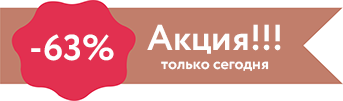
<style>
.page{position:relative;width:343px;height:101px;background:#c17e6b}
.page>*{position:absolute;margin:0}
.t1{font:16px "Circe-Bold";color:#fefefe}
.t2{font:36px "Circe-Bold";color:#fefefe}
</style>
<div class="page">
<p class="t1" style="left:147px;top:24px;width:134px;height:47px;text-align:center"><span class="t2">Акция!!!<br></span>только сегодня</p>
<p class="t2" style="left:31px;top:34px;width:83px;height:27px">-63%</p>
</div>
